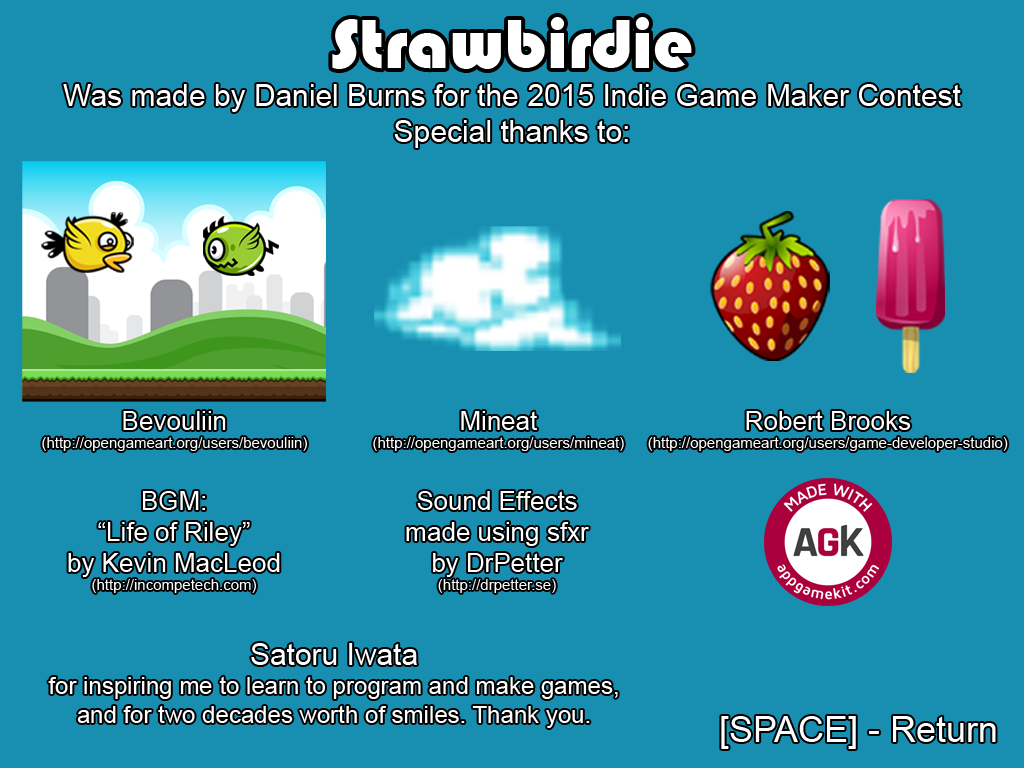
<style>
.page{position:relative;width:1024px;height:768px;background:#188fb1}
.page>*{position:absolute;margin:0}
.t1{font:72px "Bauhaus93";color:#ffffff}
.t2{font:30px "ArialMT";color:#ffffff}
.t3{font:15px "ArialMT";color:#ffffff}
.t4{font:26px "ArialMT";color:#ffffff}
.t5{font:24px "ArialMT";color:#ffffff}
.t6{font:36px "ArialMT";color:#ffffff}
</style>
<div class="page">
<p class="t1" style="left:332px;top:17px;width:360px;height:52px">Strawbirdie</p>
<p class="t2" style="left:63px;top:84px;width:898px;height:64px;text-align:center">Was made by Daniel Burns for the 2015 Indie Game Maker Contest<br>Special thanks to:</p>
<p class="t3" style="left:42px;top:411px;width:265px;height:40px;text-align:center"><span class="t4">Bevouliin<br></span>(http://opengameart.org/users/bevouliin)</p>
<p class="t3" style="left:373px;top:411px;width:251px;height:40px;text-align:center"><span class="t4">Mineat<br></span>(http://opengameart.org/users/mineat)</p>
<p class="t3" style="left:648px;top:411px;width:360px;height:40px;text-align:center"><span class="t4">Robert Brooks<br></span>(http://opengameart.org/users/game-developer-studio)</p>
<p class="t4" style="left:68px;top:491px;width:212px;height:102px;text-align:center">BGM:<br>“Life of Riley”<br>by Kevin MacLeod<br><span class="t3">(http://incompetech.com)</span></p>
<p class="t4" style="left:406px;top:491px;width:183px;height:102px;text-align:center">Sound Effects<br>made using sfxr<br>by DrPetter<br><span class="t3">(http://drpetter.se)</span></p>
<p class="t5" style="left:48px;top:643px;width:570px;height:85px;text-align:center"><span class="t2">Satoru Iwata<br></span>for inspiring me to learn to program and make games,<br>and for two decades worth of smiles. Thank you.</p>
<p class="t6" style="left:721px;top:716px;width:275px;height:33px">[SPACE] - Return</p>
</div>
